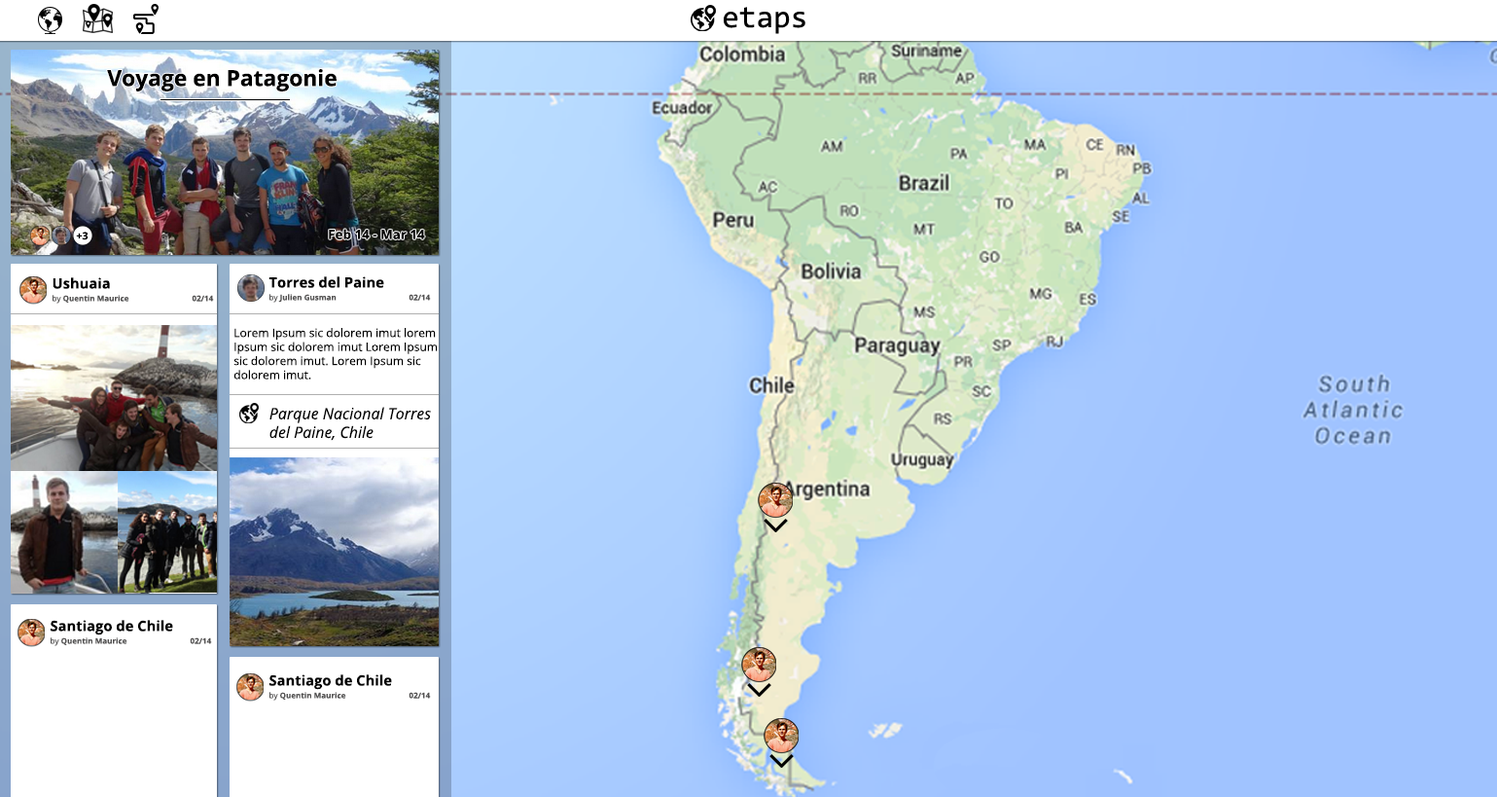
<style>
.page{position:relative;width:1497px;height:797px}
.page>*{position:absolute;margin:0}
.t1{font:30.9px "Consolas";color:#000000}
.t2{font:22px "OpenSans-Bold";color:#000000}
.t3{font:10.3px "OpenSans-Bold";color:#000000}
.t4{font:12.9px "OpenSans-Bold";color:#000000}
.t5{font:14.2px "OpenSans-Bold";color:#000000}
.t6{font:7.8px "OpenSans-Bold";color:#535252}
.t7{font:7.8px "OpenSans";color:#535252}
.t8{font:11.7px "OpenSans";color:#000000}
.t9{font:15.6px "OpenSans-Italic";color:#000000}
</style>
<div class="page">
<p class="t1" style="left:724px;top:7px;width:81px;height:27px">etaps</p>
<p class="t2" style="left:107px;top:69px;width:230px;height:22px">Voyage en Patagonie</p>
<p class="t3" style="left:76px;top:231px;width:13px;height:9px">+3</p>
<p class="t4" style="left:329px;top:229px;width:96px;height:10px">Feb 14 - Mar 14</p>
<p class="t5" style="left:53px;top:277px;width:57px;height:12px">Ushuaia</p>
<p class="t5" style="left:268px;top:276px;width:116px;height:12px">Torres del Paine</p>
<p class="t6" style="left:269px;top:294px;width:162px;height:8px"><span class="t7">by </span>Julien Gusman   02/14</p>
<p class="t6" style="left:53px;top:295px;width:161px;height:8px"><span class="t7">by </span>Quentin Maurice  02/14</p>
<p class="t8" style="left:233px;top:328px;width:205px;height:51px">Lorem Ipsum sic dolorem imut lorem Ipsum sic dolorem imut Lorem Ipsum sic dolorem imut. Lorem Ipsum sic dolorem imut.</p>
<p class="t9" style="left:269px;top:407px;width:162px;height:34px">Parque Nacional Torres <br>del Paine, Chile</p>
<p class="t5" style="left:51px;top:620px;width:122px;height:15px">Santiago de Chile</p>
<p class="t6" style="left:51px;top:637px;width:161px;height:9px"><span class="t7">by </span>Quentin Maurice  02/14</p>
<p class="t5" style="left:269px;top:674px;width:123px;height:16px">Santiago de Chile</p>
<p class="t6" style="left:269px;top:692px;width:162px;height:8px"><span class="t7">by </span>Quentin Maurice  02/14</p>
</div>
